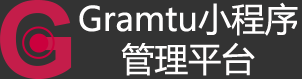
<style>
.page{position:relative;width:302px;height:79px;background:#333333}
.page>*{position:absolute;margin:0}
.t1{font:33.3px/40px "MicrosoftYaHei";color:#fffefe}
</style>
<div class="page">
<p class="t1" style="left:79px;top:2px;width:219px;height:74px;text-align:center">Gramtu小程序<br>管理平台</p>
</div>
